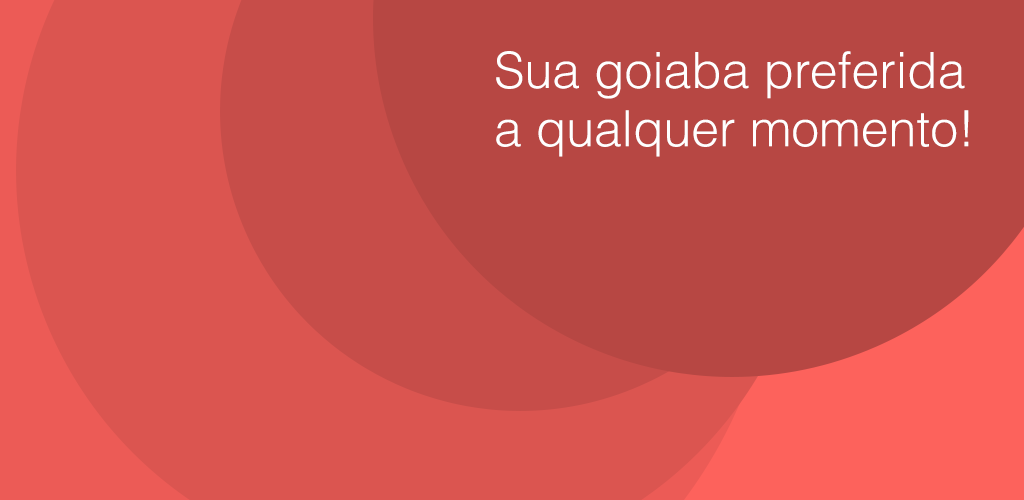
<style>
.page{position:relative;width:1024px;height:500px;background:#b74743}
.page>*{position:absolute;margin:0}
.t1{font:50px/58.3px "Helvetica-Light";color:#ffffff}
</style>
<div class="page">
<p class="t1" style="left:496px;top:51px;width:473px;height:106px">Sua goiaba preferida a qualquer momento!</p>
</div>
